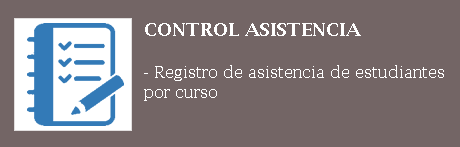
<style>
.page{position:relative;width:460px;height:147px;background:#736565}
.page>*{position:absolute;margin:0}
.t1{font:18px "LucidaBright-Demi";color:#ffffff}
.t2{font:16px "LucidaBright";color:#ffffff}
</style>
<div class="page">
<p class="t1" style="left:145px;top:23px;width:216px;height:13px">CONTROL ASISTENCIA</p>
<p class="t2" style="left:144px;top:65px;width:300px;height:36px">- Registro de asistencia de estudiantes por curso</p>
</div>
